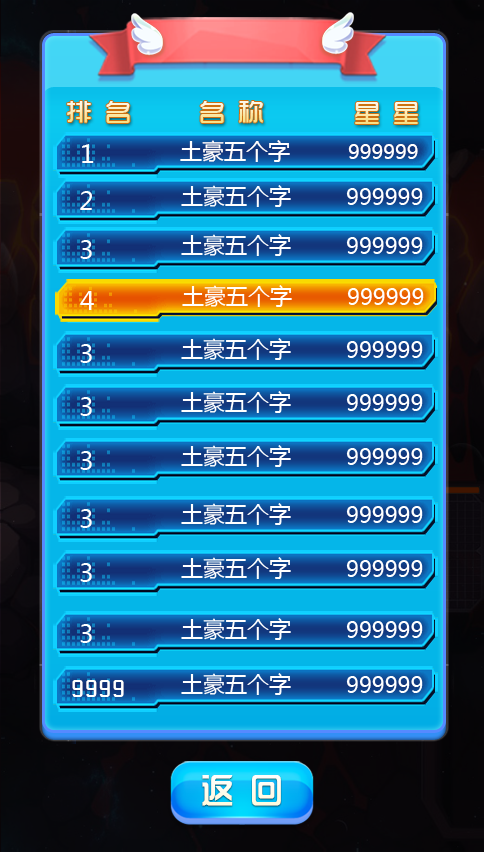
<style>
.page{position:relative;width:484px;height:852px}
.page>*{position:absolute;margin:0}
.t1{font:26px "TRENDS"}
.t2{font:25px "MicrosoftYaHei";color:#ffffff}
.t3{font:22px "MicrosoftYaHei";color:#ffffff}
.t4{font:20px "MicrosoftYaHei";color:#ffffff}
.t5{font:22px "TRENDS";letter-spacing:0.12em;color:#ffffff}
</style>
<div class="page">
<p class="t1" style="left:67px;top:101px;width:63px;height:22px">排 名</p>
<p class="t1" style="left:200px;top:101px;width:63px;height:22px">名 称</p>
<p class="t1" style="left:355px;top:102px;width:63px;height:22px">星 星</p>
<p class="t2" style="left:82px;top:144px;width:12px;height:19px">1</p>
<p class="t3" style="left:180px;top:140px;width:110px;height:22px">土豪五个字</p>
<p class="t4" style="left:348px;top:144px;width:70px;height:15px">999999</p>
<p class="t5" style="left:72px;top:680px;width:52px;height:17px">9999</p>
</div>
